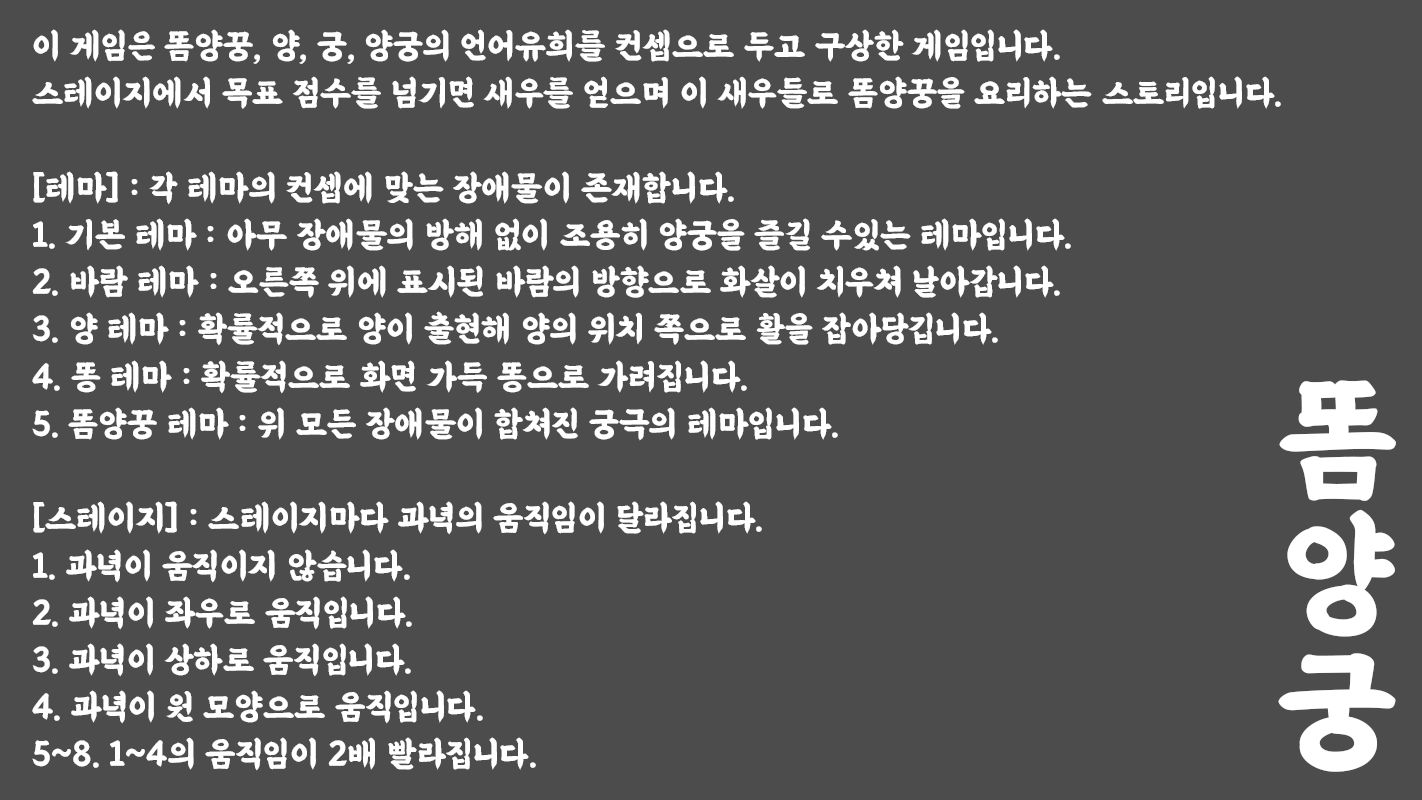
<style>
.page{position:relative;width:1422px;height:800px;background:#4c4c4c}
.page>*{position:absolute;margin:0}
.t1{font:34.7px/47.2px "BMEULJIRO";color:#ffffff}
.t2{font:138.9px/134.7px "BMEULJIRO";letter-spacing:-0.08em;color:#ffffff}
</style>
<div class="page">
<p class="t1" style="left:32px;top:29px;width:1249px;height:742px">이 게임은 똠양꿍, 양, 궁, 양궁의 언어유희를 컨셉으로 두고 구상한 게임입니다.<br>스테이지에서 목표 점수를 넘기면 새우를 얻으며 이 새우들로 똠양꿍을 요리하는 스토리입니다.<br><br>[테마] : 각 테마의 컨셉에 맞는 장애물이 존재합니다.<br>1. 기본 테마 : 아무 장애물의 방해 없이 조용히 양궁을 즐길 수있는 테마입니다.<br>2. 바람 테마 : 오른쪽 위에 표시된 바람의 방향으로 화살이 치우쳐 날아갑니다.<br>3. 양 테마 : 확률적으로 양이 출현해 양의 위치 쪽으로 활을 잡아당깁니다.<br>4. 똥 테마 : 확률적으로 화면 가득 똥으로 가려집니다.<br>5. 똠양꿍 테마 : 위 모든 장애물이 합쳐진 궁극의 테마입니다.<br><br>[스테이지] : 스테이지마다 과녁의 움직임이 달라집니다.<br>1. 과녁이 움직이지 않습니다.<br>2. 과녁이 좌우로 움직입니다.<br>3. 과녁이 상하로 움직입니다.<br>4. 과녁이 원 모양으로 움직입니다.<br>5~8. 1~4의 움직임이 2배 빨라집니다.</p>
<p class="t2" style="left:1278px;top:380px;width:118px;height:392px;text-align:center">똠<br>양<br>궁</p>
</div>
